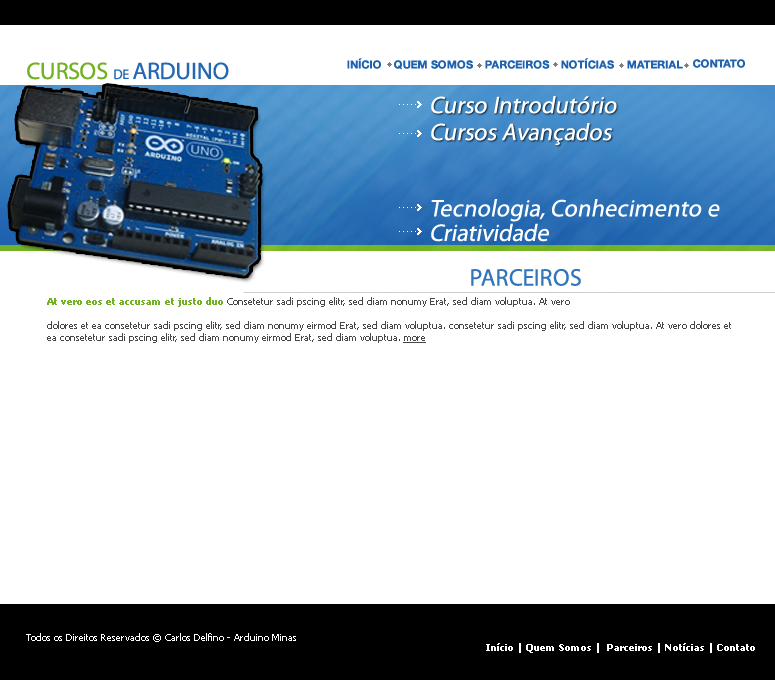
<style>
.page{position:relative;width:775px;height:680px;background:#ffffff}
.page>*{position:absolute;margin:0}
.t1{font:24px "MyriadPro-Regular";color:#2468b3;text-transform:uppercase}
.t2{font:24px "MyriadPro-Regular";color:#72b123;text-transform:uppercase}
.t3{font:14px "MyriadPro-Regular";color:#2468b3;text-transform:uppercase}
.t4{font:11px "HelveticaNeueLTStd-Bd";color:#1f62af;text-transform:uppercase}
.t5{font:24px "MyriadPro-Regular";color:#ffffff;font-style:italic}
.t6{font:24px/24.6px "MyriadPro-Regular";color:#ffffff;font-style:italic}
.t7{font:24px "MyriadPro-Regular";color:#3076bd;text-transform:uppercase}
.t8{font:10px "Tahoma";color:#474745}
.t9{font:10px "Tahoma-Bold";color:#72b123}
.t10{font:10px "Tahoma";color:#474745;text-decoration:underline}
.t11{font:10px "Tahoma";color:#ffffff}
.t12{font:10px "Tahoma-Bold";color:#ffffff}
</style>
<div class="page">
<p class="t1" style="left:27px;top:62px;width:202px;height:18px"><span class="t2">Cursos </span><span class="t3">de </span>Arduino</p>
<p class="t4" style="left:347px;top:58px;width:34px;height:11px">Início</p>
<p class="t4" style="left:394px;top:60px;width:79px;height:10px">Quem Somos</p>
<p class="t4" style="left:485px;top:60px;width:65px;height:9px">Parceiros</p>
<p class="t4" style="left:561px;top:58px;width:53px;height:11px">Notícias</p>
<p class="t4" style="left:627px;top:60px;width:56px;height:9px">Material</p>
<p class="t4" style="left:693px;top:59px;width:52px;height:9px">Contato</p>
<p class="t5" style="left:431px;top:96px;width:186px;height:18px">Curso Introdutório</p>
<p class="t5" style="left:431px;top:123px;width:181px;height:23px">Cursos Avançados</p>
<p class="t6" style="left:431px;top:199px;width:289px;height:43px">Tecnologia, Conhecimento e<br>Criatividade</p>
<p class="t7" style="left:471px;top:269px;width:110px;height:17px">Parceiros</p>
<p class="t8" style="left:47px;top:297px;width:684px;height:46px"><span class="t9">At vero eos et accusam et justo duo </span>Consetetur sadi pscing elitr, sed diam nonumy Erat, sed diam voluptua. At vero <br><br>dolores et ea consetetur sadi pscing elitr, sed diam nonumy eirmod Erat, sed diam voluptua. consetetur sadi pscing elitr, sed diam voluptua. At vero dolores et ea consetetur sadi pscing elitr, sed diam nonumy eirmod Erat, sed diam voluptua. <span class="t10">more</span></p>
<p class="t11" style="left:26px;top:633px;width:270px;height:9px">Todos os Direitos Reservados © Carlos Delfino - Arduino Minas</p>
<p class="t12" style="left:486px;top:643px;width:269px;height:10px">Início | Quem Somos |  Parceiros | Notícias | Contato</p>
</div>
